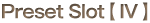
<style>
.page{position:relative;width:150px;height:23px;background:#ffffff}
.page>*{position:absolute;margin:0}
.t1{font:18px "GothicMB101Pro-DeBold";letter-spacing:-0.04em}
.t2{font:18px "GothicMB101Pro-DeBold";letter-spacing:-0.04em;color:#7a6652}
</style>
<div class="page">
<p class="t1" style="left:2px;top:2px;width:146px;height:19px">Preset Slot【     】</p>
<p class="t2" style="left:120px;top:4px;width:18px;height:15px">IV</p>
</div>
